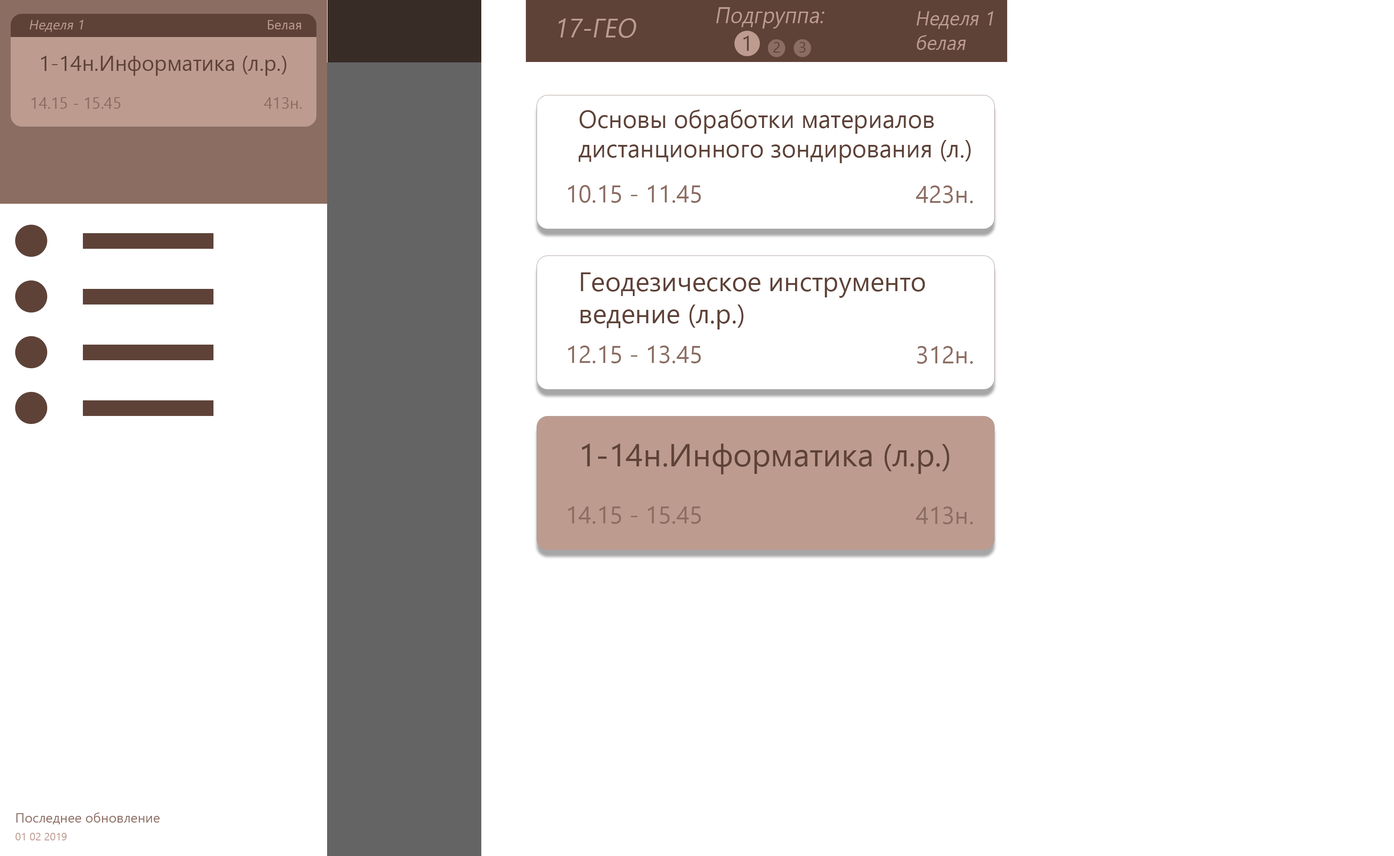
<style>
.page{position:relative;width:1394px;height:856px;background:#ffffff}
.page>*{position:absolute;margin:0}
.t1{font:22.1px "SegoeUI";color:#bd9b8f;font-style:italic;scale:0.95 1}
.t2{font:20.1px "SegoeUI";color:#bd9b8f;font-style:italic;scale:0.95 1}
.t3{font:13.4px "SegoeUI";color:#bd9b8f;font-style:italic}
.t4{font:13.4px "SegoeUI";color:#bd9b8f}
.t5{font:26.7px "SegoeUI";color:#bd9b8f;font-style:italic;scale:0.95 1}
.t6{font:21.4px "SegoeUI";color:#5e4238}
.t7{font:15px "SegoeUI";color:#5e4238}
.t8{font:16px "SegoeUI";color:#8c6d62}
.t9{font:24.5px "SegoeUI";color:#5e4238}
.t10{font:24px "SegoeUI";color:#8c6d62}
.t11{font:26.7px "SegoeUI";color:#5e4238}
.t12{font:32px "SegoeUI";color:#5e4238}
.t13{font:13.4px "SegoeUI";color:#8c6d62}
.t14{font:10.7px "SegoeUI";color:#bd9b8f}
</style>
<div class="page">
<p class="t1" style="left:716px;top:7px;width:108px;height:22px">Подгруппа:</p>
<p class="t2" style="left:917px;top:11px;width:76px;height:18px">Неделя 1</p>
<p class="t3" style="left:29px;top:20px;width:54px;height:12px">Неделя 1</p>
<p class="t4" style="left:268px;top:20px;width:33px;height:9px">Белая</p>
<p class="t5" style="left:558px;top:18px;width:78px;height:20px">17-ГЕО</p>
<p class="t6" style="left:743px;top:36px;width:6px;height:15px">1</p>
<p class="t7" style="left:773px;top:42px;width:7px;height:11px">2</p>
<p class="t7" style="left:799px;top:42px;width:7px;height:11px">3</p>
<p class="t2" style="left:917px;top:35px;width:49px;height:15px">белая</p>
<p class="t6" style="left:41px;top:56px;width:246px;height:20px">1-14н.Информатика (л.р.)</p>
<p class="t8" style="left:32px;top:97px;width:88px;height:12px">14.15 - 15.45</p>
<p class="t8" style="left:264px;top:97px;width:38px;height:12px">413н.</p>
<p class="t9" style="left:578px;top:109px;width:392px;height:54px">Основы обработки материалов <br>дистанционного зондирования (л.)</p>
<p class="t10" style="left:568px;top:185px;width:133px;height:18px">10.15 - 11.45</p>
<p class="t10" style="left:916px;top:185px;width:57px;height:18px">423н.</p>
<p class="t11" style="left:580px;top:272px;width:345px;height:57px">Геодезическое инструменто<br>ведение (л.р.)</p>
<p class="t10" style="left:568px;top:345px;width:133px;height:18px">12.15 - 13.45</p>
<p class="t10" style="left:917px;top:346px;width:56px;height:18px">312н.</p>
<p class="t12" style="left:582px;top:443px;width:367px;height:31px">1-14н.Информатика (л.р.)</p>
<p class="t10" style="left:568px;top:506px;width:133px;height:18px">14.15 - 15.45</p>
<p class="t10" style="left:916px;top:506px;width:57px;height:18px">413н.</p>
<p class="t13" style="left:16px;top:812px;width:144px;height:12px">Последнее обновление</p>
<p class="t14" style="left:15px;top:832px;width:52px;height:8px">01 02 2019</p>
</div>
